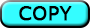
<style>
.page{position:relative;width:90px;height:28px;background:#34fdff}
.page>*{position:absolute;margin:0}
.t1{font:19px "Verdana";color:#000000;font-weight:bold}
</style>
<div class="page">
<p class="t1" style="left:19px;top:6px;width:53px;height:15px">COPY</p>
</div>
